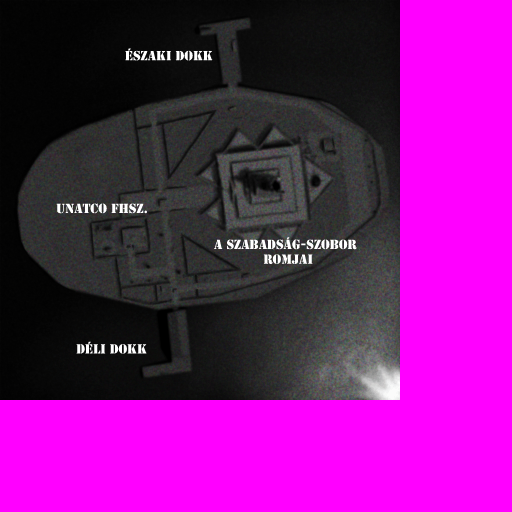
<style>
.page{position:relative;width:512px;height:512px;background:#ff00ff}
.page>*{position:absolute;margin:0}
.t1{font:12.2px "StencilStd";color:#ffffff}
</style>
<div class="page">
<p class="t1" style="left:125px;top:48px;width:88px;height:13px">ÉSZAKI DOKK</p>
<p class="t1" style="left:56px;top:203px;width:91px;height:11px">unatco FHSZ.</p>
<p class="t1" style="left:214px;top:237px;width:143px;height:27px">A SZABADSÁG-SZOBOR<br>            ROMJAI</p>
<p class="t1" style="left:76px;top:341px;width:71px;height:13px">DÉLI DOKK</p>
</div>
